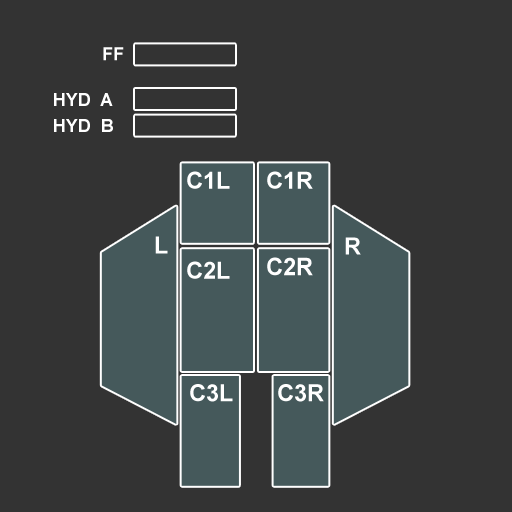
<style>
.page{position:relative;width:512px;height:512px;background:#333333}
.page>*{position:absolute;margin:0}
.t1{font:18px "Arial-BoldMT";color:#ffffff}
.t2{font:23.4px "Arial-BoldMT";color:#ffffff}
.t3{font:24.3px "Arial-BoldMT";color:#ffffff;scale:0.96 1}
</style>
<div class="page">
<p class="t1" style="left:103px;top:47px;width:21px;height:14px">FF</p>
<p class="t1" style="left:54px;top:93px;width:59px;height:13px">HYD  A</p>
<p class="t1" style="left:54px;top:119px;width:59px;height:13px">HYD  B</p>
<p class="t2" style="left:187px;top:171px;width:43px;height:18px">C1L</p>
<p class="t2" style="left:267px;top:171px;width:46px;height:18px">C1R</p>
<p class="t2" style="left:155px;top:236px;width:13px;height:18px">L</p>
<p class="t2" style="left:345px;top:237px;width:16px;height:18px">R</p>
<p class="t3" style="left:267px;top:257px;width:46px;height:19px">C2R</p>
<p class="t2" style="left:187px;top:261px;width:43px;height:18px">C2L</p>
<p class="t2" style="left:190px;top:384px;width:43px;height:18px">C3L</p>
<p class="t2" style="left:278px;top:384px;width:46px;height:18px">C3R</p>
</div>
